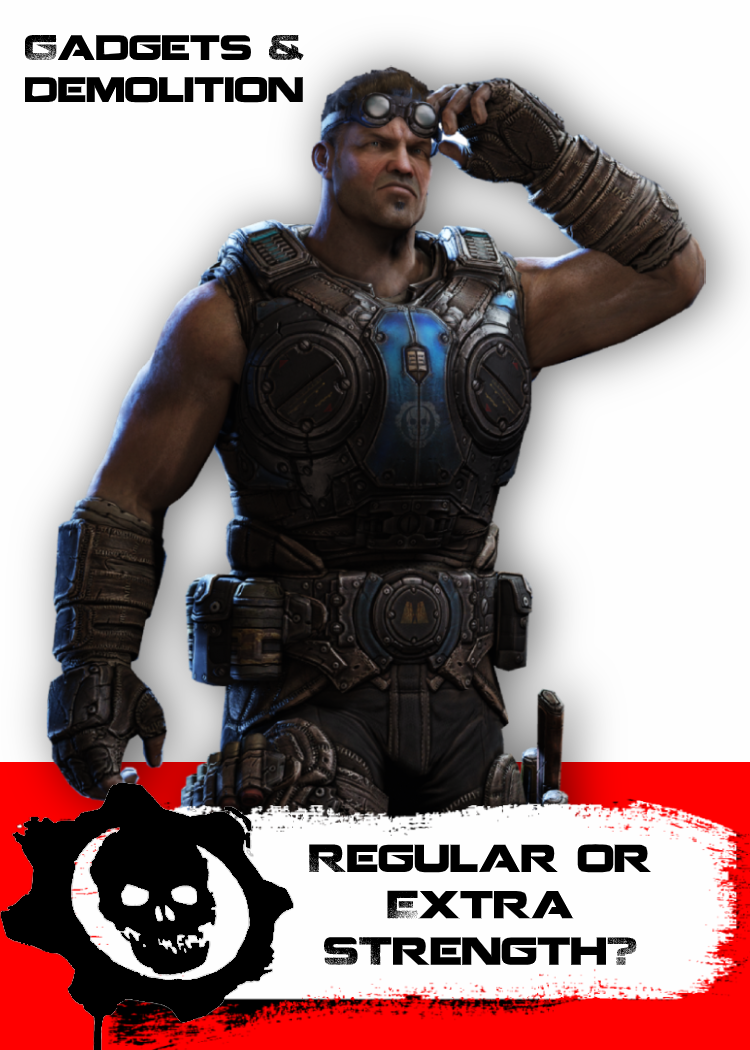
<style>
.page{position:relative;width:750px;height:1050px;background:#fefefe}
.page>*{position:absolute;margin:0}
.t1{font:35px "Coalition";color:#000000}
.t2{font:38.7px "Coalition";color:#000000}
</style>
<div class="page">
<p class="t1" style="left:24px;top:34px;width:280px;height:69px">Gadgets &amp;<br>demolition</p>
<p class="t2" style="left:309px;top:844px;width:343px;height:121px;text-align:center">Regular or<br>Extra<br>STrength?</p>
</div>
